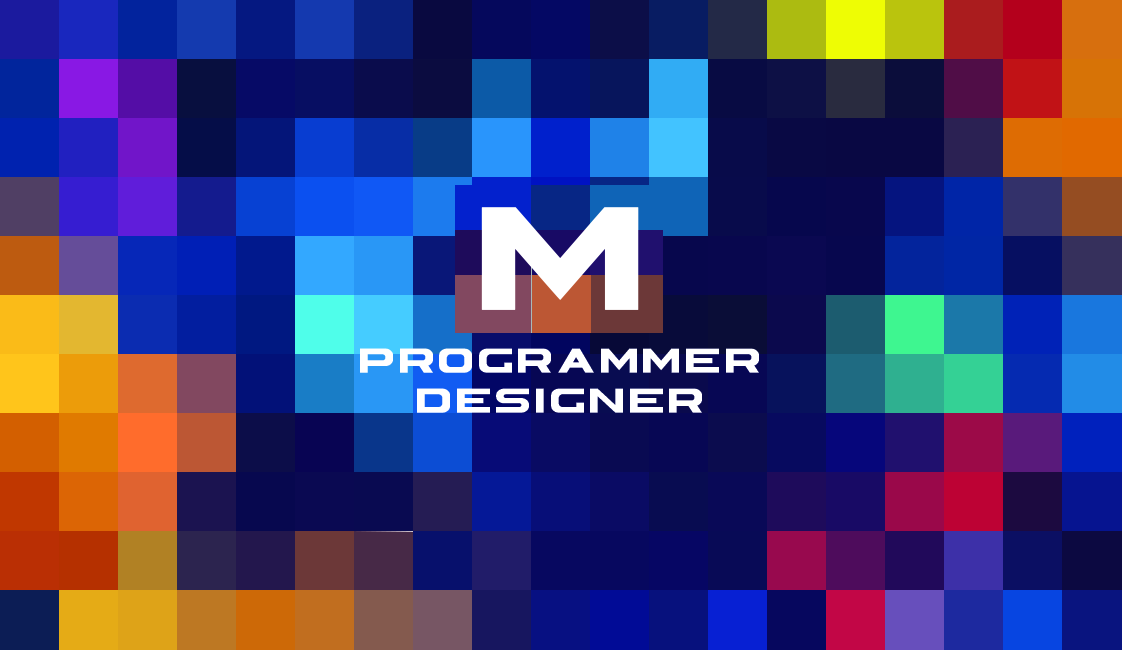
<style>
.page{position:relative;width:1122px;height:650px}
.page>*{position:absolute;margin:0}
.t1{font:196.4px "ASTERA";letter-spacing:0.1em;color:#ffffff}
.t2{font:46px "ASTERA";letter-spacing:0.1em;color:#ffffff}
</style>
<div class="page">
<p class="t1" style="left:481px;top:207px;width:158px;height:103px">M</p>
<p class="t2" style="left:360px;top:348px;width:399px;height:25px">programmer</p>
<p class="t2" style="left:417px;top:388px;width:285px;height:25px">designer</p>
</div>
